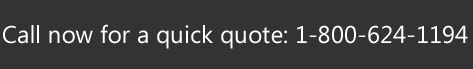
<style>
.page{position:relative;width:473px;height:69px;background:#333333}
.page>*{position:absolute;margin:0}
.t1{font:24.3px "Ebrima";color:#ffffff}
</style>
<div class="page">
<p class="t1" style="left:3px;top:24px;width:465px;height:25px">Call now for a quick quote: 1-800-624-1194</p>
</div>
